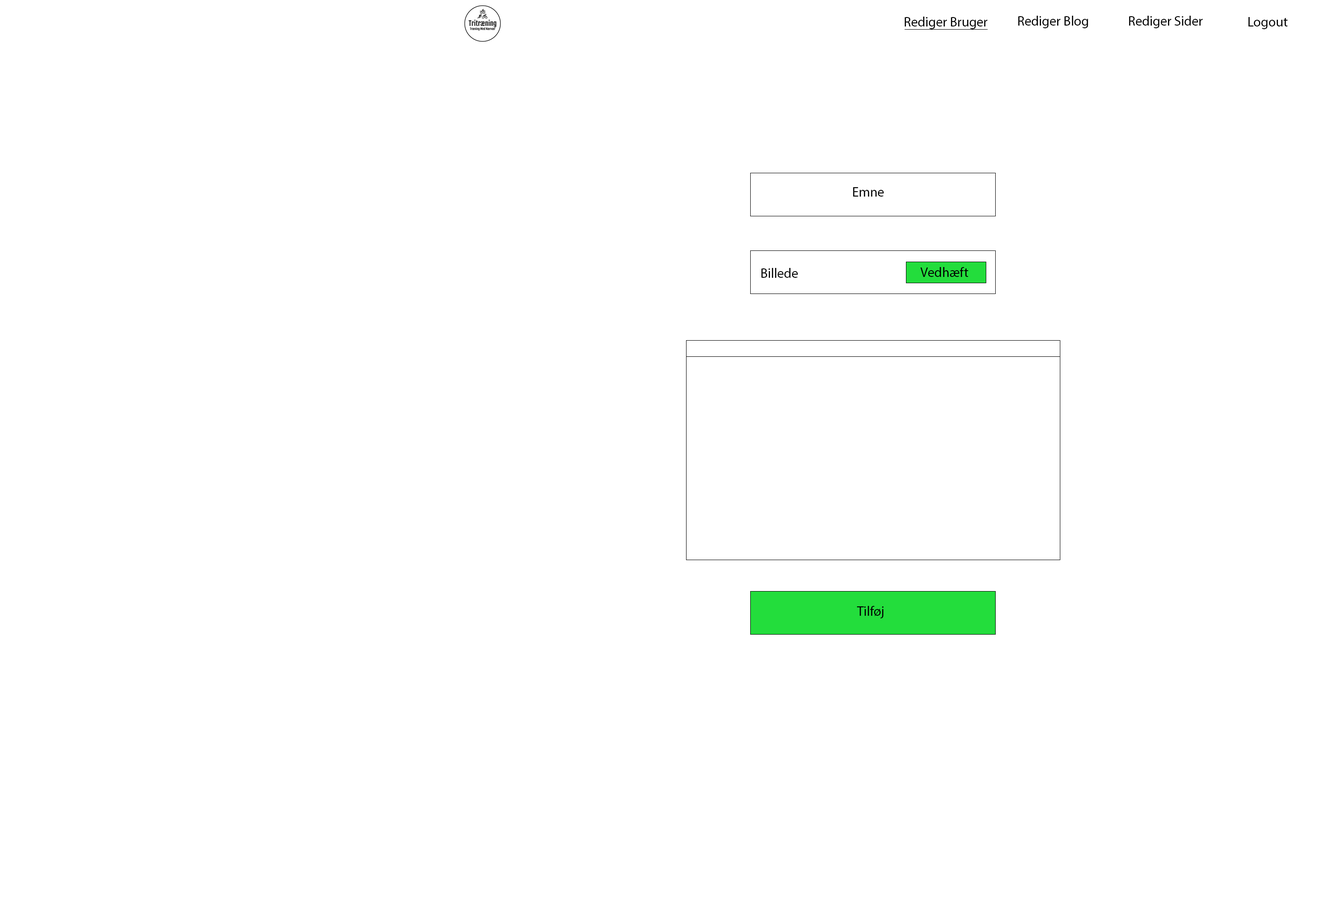
<style>
.page{position:relative;width:1321px;height:903px;background:#ffffff}
.page>*{position:absolute;margin:0}
.t1{font:13.5px "MyriadPro-Regular";color:#000000}
</style>
<div class="page">
<p class="t1" style="left:905px;top:17px;width:83px;height:12px">Rediger Bruger</p>
<p class="t1" style="left:1018px;top:16px;width:70px;height:12px">Rediger Blog</p>
<p class="t1" style="left:1129px;top:16px;width:74px;height:12px">Rediger Sider</p>
<p class="t1" style="left:1248px;top:17px;width:40px;height:12px">Logout</p>
<p class="t1" style="left:853px;top:187px;width:31px;height:10px">Emne</p>
<p class="t1" style="left:761px;top:268px;width:37px;height:10px">Billede</p>
<p class="t1" style="left:920px;top:267px;width:48px;height:10px">Vedhæft</p>
<p class="t1" style="left:857px;top:606px;width:26px;height:12px">Tilføj</p>
</div>
